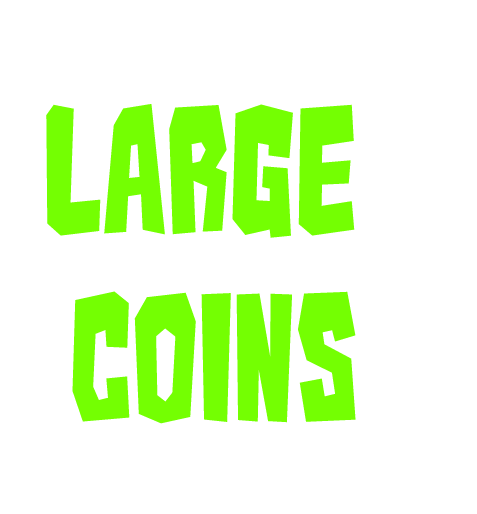
<style>
.page{position:relative;width:477px;height:514px;background:#ffffff}
.page>*{position:absolute;margin:0}
.t1{font:156.1px "Kaiju-Monster__G";color:#74ff02}
</style>
<div class="page">
<p class="t1" style="left:46px;top:104px;width:310px;height:320px;text-align:center">Large <br>Coins</p>
</div>
